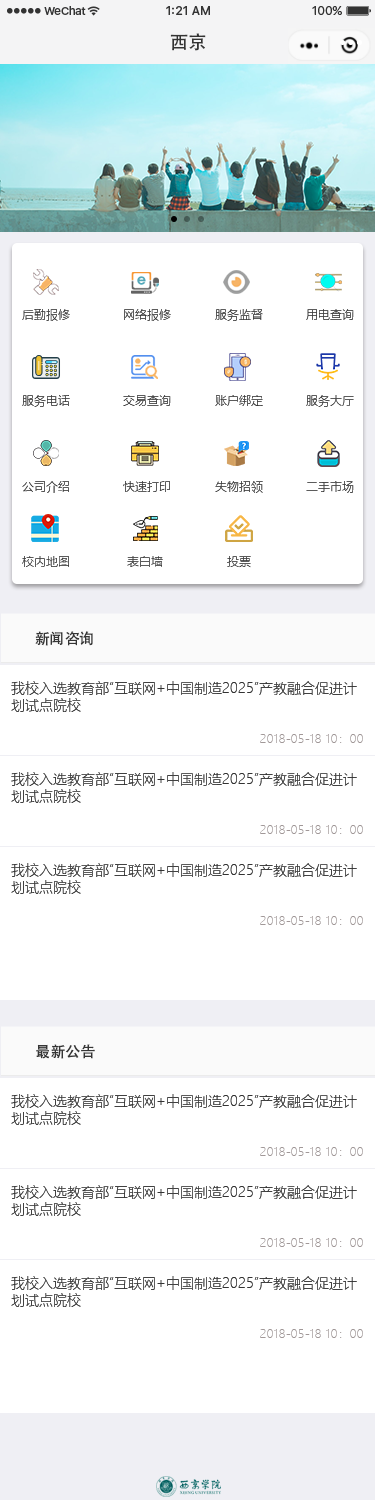
<style>
.page{position:relative;width:375px;height:1500px;background:#ffffff}
.page>*{position:absolute;margin:0}
.t1{font:18.5px "AdobeHeitiStd-Regular";color:#333333}
.t2{font:12px "MicrosoftYaHeiLight";color:#333333}
.t3{font:12px "MicrosoftYaHeiLight"}
.t4{font:14.9px "AdobeHeitiStd-Regular";color:#353535}
.t5{font:14px "MicrosoftYaHeiLight";color:#333333}
.t6{font:12px "MicrosoftYaHeiLight";color:#a19898}
</style>
<div class="page">
<p class="t1" style="left:170px;top:33px;width:36px;height:18px">西京</p>
<p class="t2" style="left:22px;top:309px;width:48px;height:12px">后勤报修</p>
<p class="t2" style="left:124px;top:309px;width:47px;height:12px">网络报修</p>
<p class="t3" style="left:215px;top:309px;width:48px;height:12px">服务监督</p>
<p class="t3" style="left:306px;top:309px;width:48px;height:11px">用电查询</p>
<p class="t3" style="left:22px;top:395px;width:48px;height:12px">服务电话</p>
<p class="t3" style="left:123px;top:395px;width:48px;height:11px">交易查询</p>
<p class="t2" style="left:215px;top:395px;width:48px;height:11px">账户绑定</p>
<p class="t3" style="left:306px;top:395px;width:48px;height:12px">服务大厅</p>
<p class="t3" style="left:22px;top:481px;width:47px;height:12px">公司介绍</p>
<p class="t3" style="left:123px;top:481px;width:47px;height:11px">快速打印</p>
<p class="t3" style="left:215px;top:481px;width:48px;height:12px">失物招领</p>
<p class="t3" style="left:306px;top:481px;width:48px;height:12px">二手市场</p>
<p class="t3" style="left:22px;top:556px;width:47px;height:11px">校内地图</p>
<p class="t3" style="left:127px;top:556px;width:36px;height:11px">表白墙</p>
<p class="t3" style="left:227px;top:556px;width:24px;height:12px">投票</p>
<p class="t4" style="left:35px;top:631px;width:58px;height:15px">新闻咨询</p>
<p class="t5" style="left:11px;top:681px;width:346px;height:31px">我校入选教育部“互联网+中国制造2025”产教融合促进计划试点院校</p>
<p class="t6" style="left:260px;top:734px;width:103px;height:9px">2018-05-18 10：00</p>
<p class="t5" style="left:11px;top:772px;width:346px;height:31px">我校入选教育部“互联网+中国制造2025”产教融合促进计划试点院校</p>
<p class="t6" style="left:260px;top:825px;width:103px;height:9px">2018-05-18 10：00</p>
<p class="t5" style="left:11px;top:863px;width:346px;height:31px">我校入选教育部“互联网+中国制造2025”产教融合促进计划试点院校</p>
<p class="t6" style="left:260px;top:916px;width:103px;height:9px">2018-05-18 10：00</p>
<p class="t4" style="left:36px;top:1044px;width:59px;height:15px">最新公告</p>
<p class="t5" style="left:11px;top:1094px;width:346px;height:31px">我校入选教育部“互联网+中国制造2025”产教融合促进计划试点院校</p>
<p class="t6" style="left:260px;top:1147px;width:103px;height:9px">2018-05-18 10：00</p>
<p class="t5" style="left:11px;top:1185px;width:346px;height:31px">我校入选教育部“互联网+中国制造2025”产教融合促进计划试点院校</p>
<p class="t6" style="left:260px;top:1238px;width:103px;height:9px">2018-05-18 10：00</p>
<p class="t5" style="left:11px;top:1276px;width:346px;height:31px">我校入选教育部“互联网+中国制造2025”产教融合促进计划试点院校</p>
<p class="t6" style="left:260px;top:1329px;width:103px;height:9px">2018-05-18 10：00</p>
</div>
